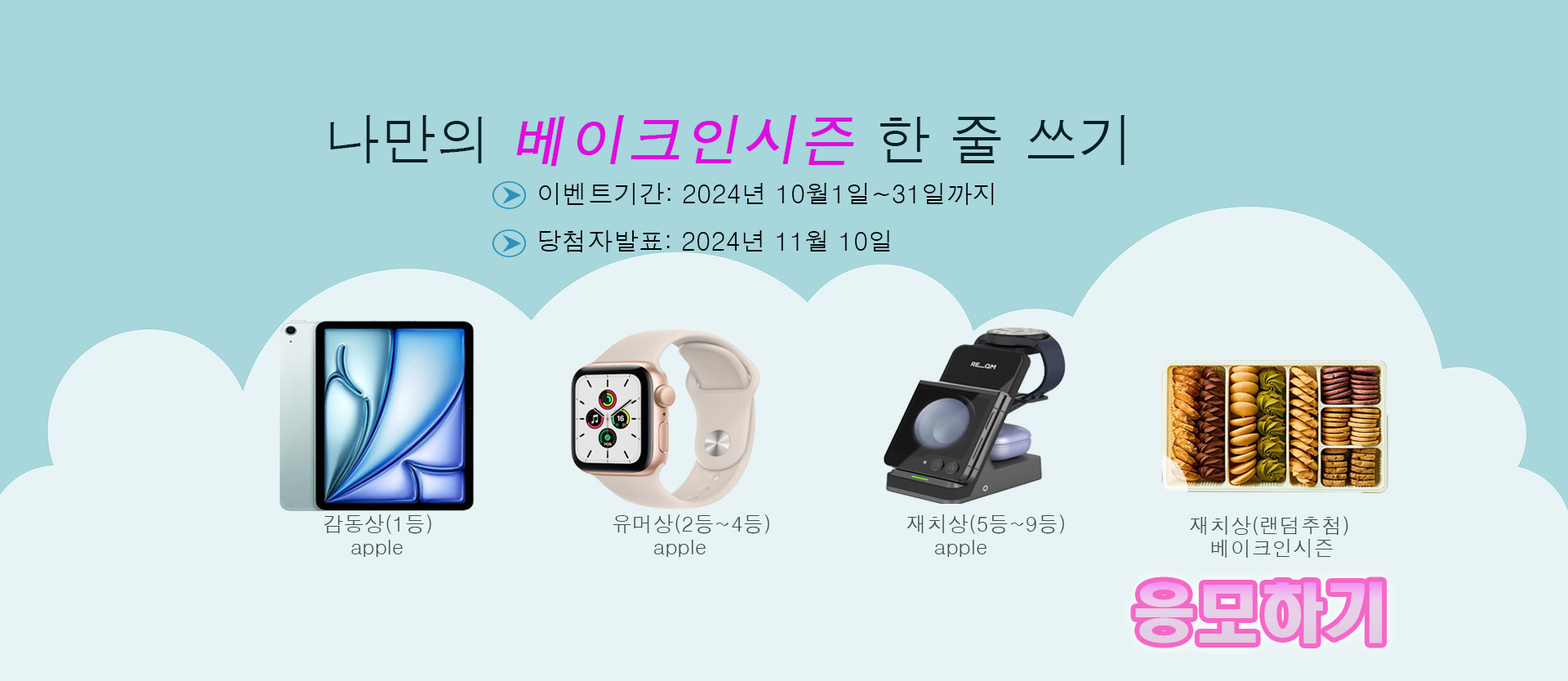
<style>
.page{position:relative;width:1568px;height:681px;background:#e8f3f5}
.page>*{position:absolute;margin:0}
.t1{font:55.9px "Dotum";color:#dc0edf;font-weight:bold;font-style:italic}
.t2{font:55.9px "Dotum";color:#021f23}
.t3{font:25.5px "Dotum";color:#000000}
.t4{font:20.8px/22.3px "Dotum";color:#3c5053}
.t5{font:63.8px "HeadlineR-HM";color:#e6cde8}
</style>
<div class="page">
<p class="t1" style="left:330px;top:115px;width:795px;height:52px"><span class="t2">나만의 </span>베이크인시즌<span class="t2"> 한 줄 쓰기</span></p>
<p class="t3" style="left:539px;top:183px;width:455px;height:22px">이벤트기간: 2024년 10월1일~31일까지</p>
<p class="t3" style="left:539px;top:230px;width:351px;height:22px">당첨자발표: 2024년 11월 10일</p>
<p class="t4" style="left:323px;top:514px;width:108px;height:43px">감동상(1등)<br>    apple</p>
<p class="t4" style="left:612px;top:514px;width:157px;height:43px">유머상(2등~4등)<br>      apple</p>
<p class="t4" style="left:906px;top:514px;width:158px;height:43px">재치상(5등~9등)<br>    apple</p>
<p class="t4" style="left:1190px;top:516px;width:158px;height:42px">재치상(랜덤추첨)<br>   베이크인시즌</p>
<p class="t5" style="left:1135px;top:581px;width:248px;height:63px">응모하기</p>
</div>
